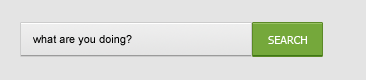
<style>
.page{position:relative;width:366px;height:80px;background:#e4e4e4}
.page>*{position:absolute;margin:0}
.t1{font:11px "ArialMT";color:#000000}
.t2{font:11px "Tahoma";color:#ffffff}
</style>
<div class="page">
<p class="t1" style="left:33px;top:35px;width:99px;height:11px">what are you doing?</p>
<p class="t2" style="left:268px;top:36px;width:39px;height:8px">SEARCH</p>
</div>
